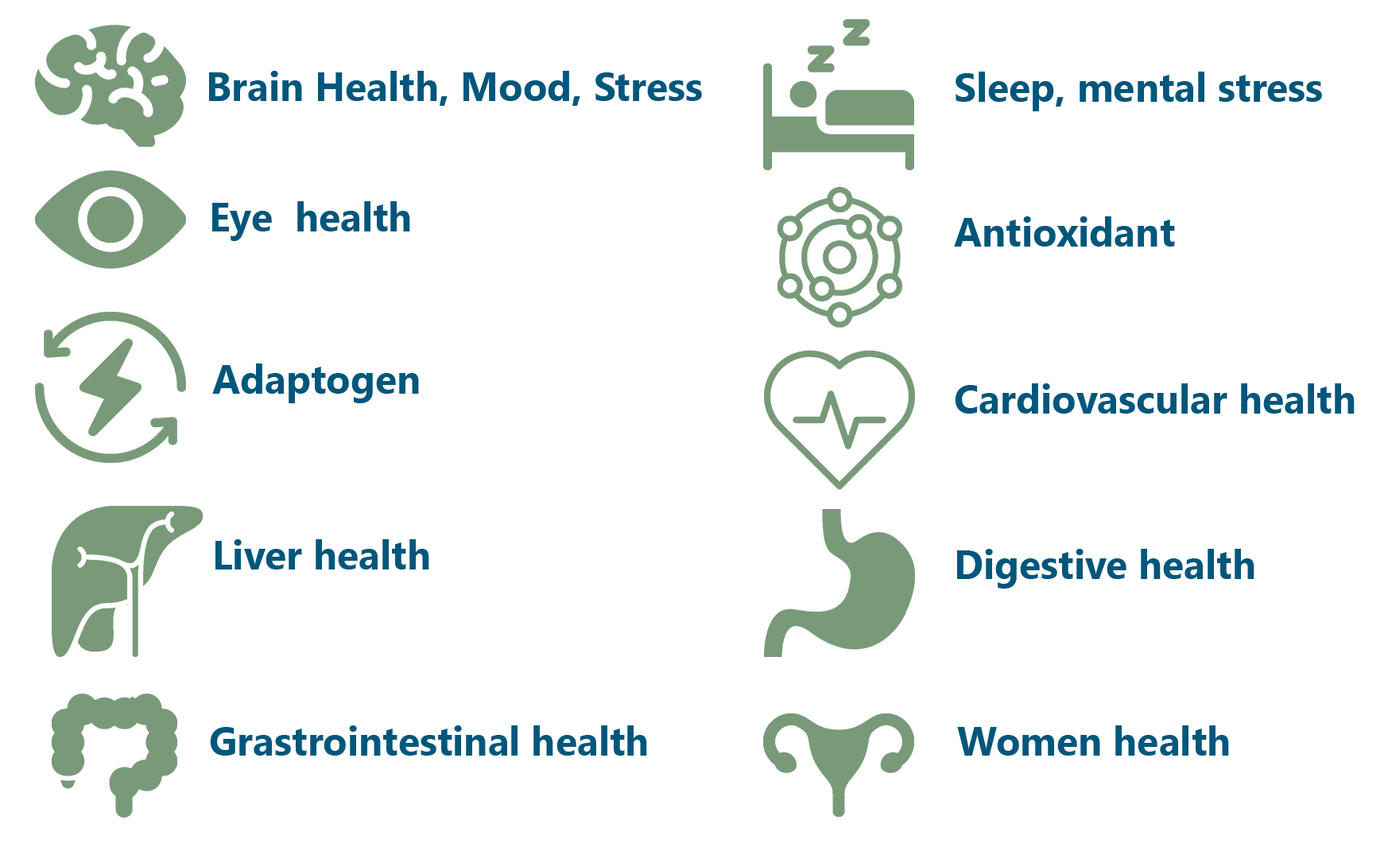
<style>
.page{position:relative;width:1388px;height:859px;background:#ffffff}
.page>*{position:absolute;margin:0}
.t1{font:39.8px "SegoeUI-Bold";color:#00567b}
</style>
<div class="page">
<p class="t1" style="left:209px;top:71px;width:493px;height:35px">Brain Health, Mood, Stress</p>
<p class="t1" style="left:956px;top:72px;width:366px;height:39px">Sleep, mental stress</p>
<p class="t1" style="left:212px;top:201px;width:198px;height:40px">Eye  health</p>
<p class="t1" style="left:954px;top:216px;width:221px;height:31px">Antioxidant</p>
<p class="t1" style="left:212px;top:363px;width:207px;height:40px">Adaptogen</p>
<p class="t1" style="left:955px;top:383px;width:400px;height:31px">Cardiovascular health</p>
<p class="t1" style="left:216px;top:539px;width:213px;height:30px">Liver health</p>
<p class="t1" style="left:957px;top:549px;width:298px;height:39px">Digestive health</p>
<p class="t1" style="left:210px;top:725px;width:437px;height:30px">Grastrointestinal health</p>
<p class="t1" style="left:957px;top:725px;width:272px;height:30px">Women health</p>
</div>
